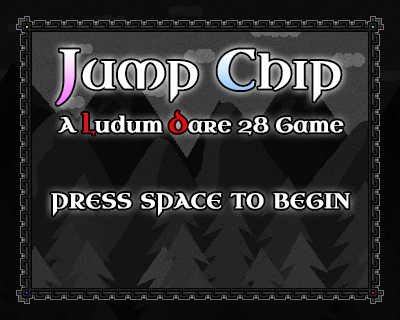
<style>
.page{position:relative;width:400px;height:320px}
.page>*{position:absolute;margin:0}
.t1{font:55px "UncialAntiqua-Regular";color:#ffffff;font-variant:small-caps;font-weight:bold}
.t2{font:55px "UncialAntiqua-Regular";color:#fa6fff;font-variant:small-caps;font-weight:bold}
.t3{font:55px "UncialAntiqua-Regular";color:#74b9ff;font-variant:small-caps;font-weight:bold}
.t4{font:21px "UncialAntiqua-Regular";color:#ffffff;font-weight:bold}
.t5{font:21px "UncialAntiqua-Regular";color:#e71111;font-weight:bold}
.t6{font:21px "UncialAntiqua-Regular";color:#ff0000;font-weight:bold}
.t7{font:30px "UncialAntiqua-Regular";color:#ffffff;font-variant:small-caps;font-weight:bold}
</style>
<div class="page">
<p class="t1" style="left:56px;top:49px;width:285px;height:56px"><span class="t2">J</span>ump <span class="t3">C</span>hip</p>
<p class="t4" style="left:58px;top:111px;width:286px;height:24px">A <span class="t5">L</span>udum <span class="t6">D</span>are 28 Game</p>
<p class="t7" style="left:51px;top:193px;width:299px;height:23px">press space to begin</p>
</div>
